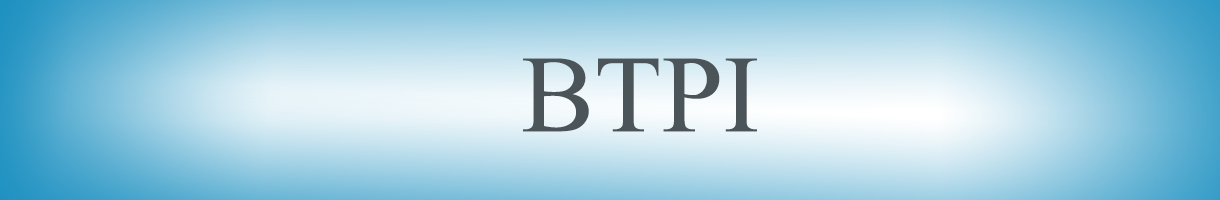
<style>
.page{position:relative;width:1220px;height:200px}
.page>*{position:absolute;margin:0}
.t1{font:110px "MongolianBaiti";color:#4b5458}
</style>
<div class="page">
<p class="t1" style="left:523px;top:58px;width:234px;height:74px">BTPI</p>
</div>
